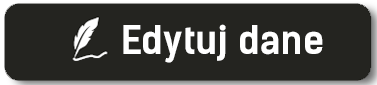
<style>
.page{position:relative;width:377px;height:85px;background:#242420}
.page>*{position:absolute;margin:0}
.t1{font:37.5px "KelsonSansBG-Bold";color:#ffffff}
</style>
<div class="page">
<p class="t1" style="left:123px;top:24px;width:200px;height:39px">Edytuj dane</p>
</div>
